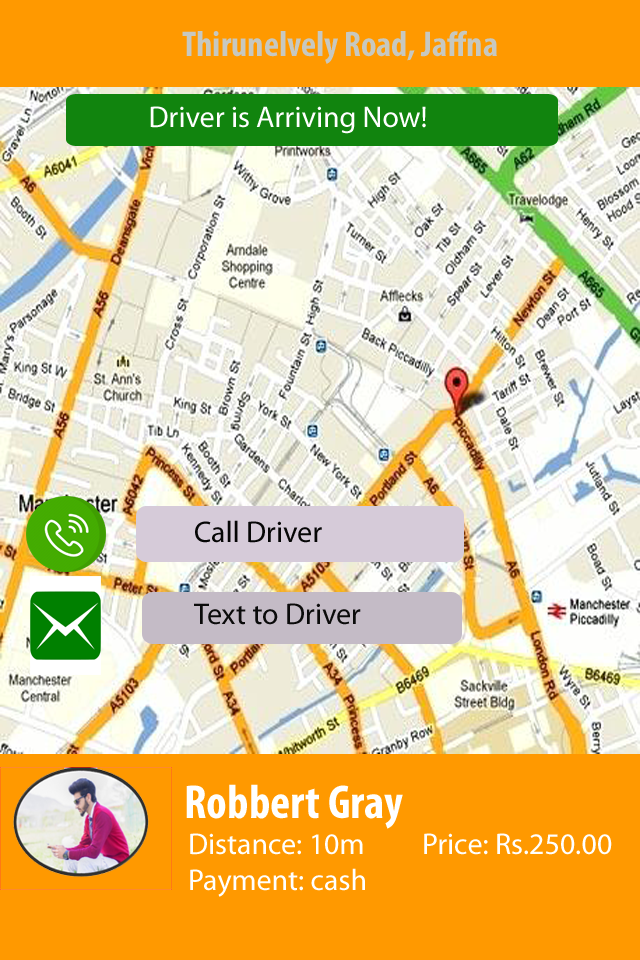
<style>
.page{position:relative;width:640px;height:960px;background:#ff9900}
.page>*{position:absolute;margin:0}
.t1{font:36px "MyriadPro-BoldCond";color:#c7c8c0}
.t2{font:30px "MyriadPro-Regular";color:#ffffff}
.t3{font:30px "MyriadPro-Regular";color:#060606}
.t4{font:30px "MyriadPro-Regular";color:#0b0b0b}
.t5{font:48px "MyriadPro-BoldCond";color:#ffffff}
</style>
<div class="page">
<p class="t1" style="left:182px;top:30px;width:315px;height:34px">Thirunelvely Road, Jaffna</p>
<p class="t2" style="left:150px;top:106px;width:276px;height:28px">Driver is Arriving Now!</p>
<p class="t3" style="left:195px;top:520px;width:127px;height:23px">Call Driver</p>
<p class="t4" style="left:194px;top:603px;width:167px;height:22px">Text to Driver</p>
<p class="t5" style="left:186px;top:784px;width:217px;height:45px">Robbert Gray</p>
<p class="t2" style="left:190px;top:833px;width:422px;height:64px">Distance: 10m         Price: Rs.250.00<br>Payment: cash</p>
</div>
